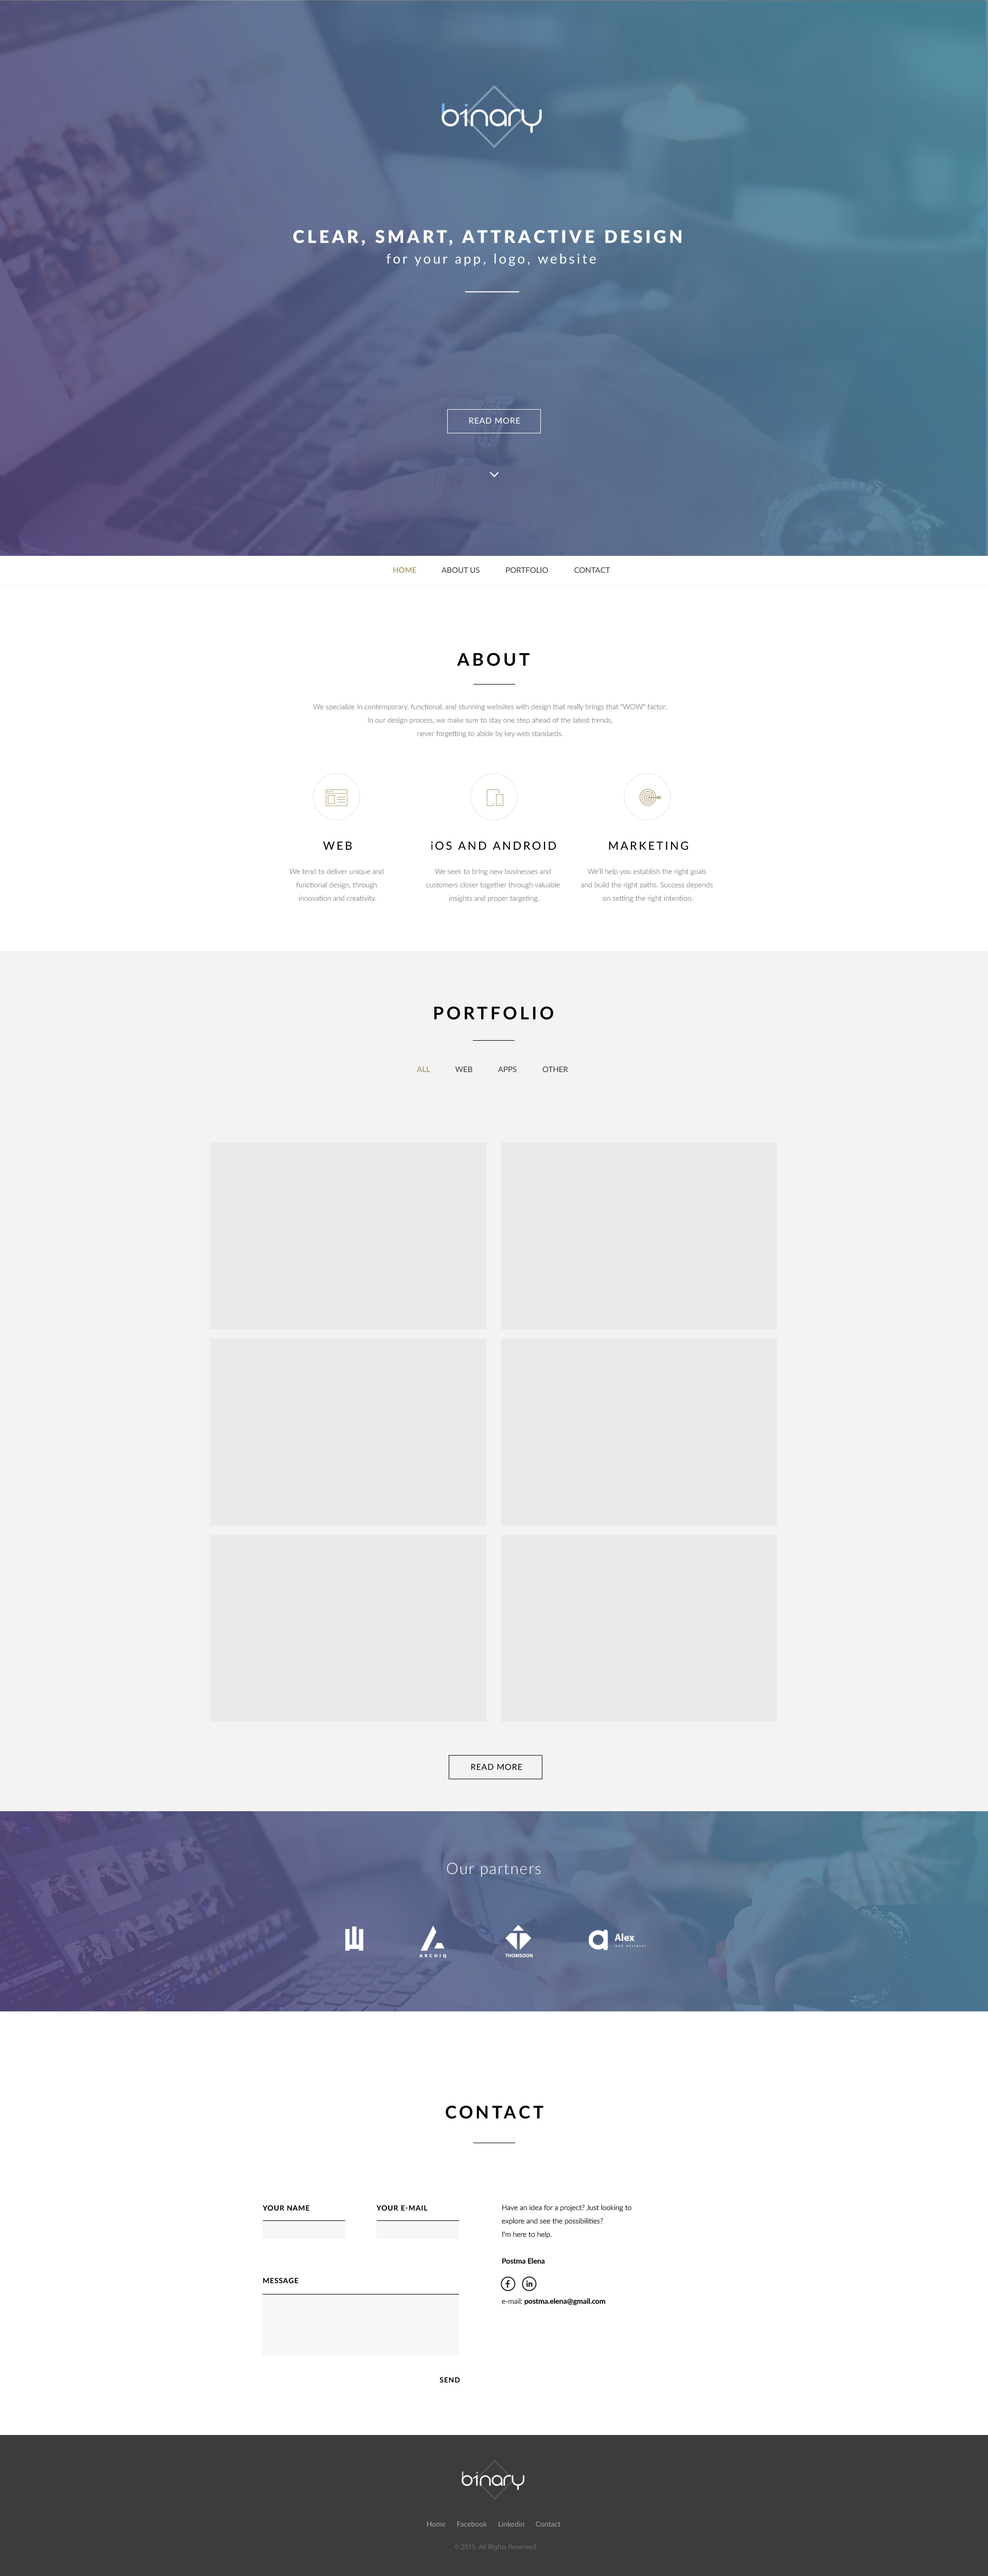
<style>
.page{position:relative;width:988px;height:2576px;background:#ffffff}
.page>*{position:absolute;margin:0}
.t1{font:17.5px/20.6px "Lato-Black";letter-spacing:0.16em;color:#ffffff;text-transform:uppercase}
.t2{font:13.4px/20.6px "Lato-Regular";letter-spacing:0.16em;color:#ffffff}
.t3{font:8.2px "Lato-Regular";letter-spacing:0.06em;color:#ffffff}
.t4{font:7.7px "Lato-Regular";color:#3c3c3c}
.t5{font:7.7px "Lato-Bold";color:#ada074}
.t6{font:17.5px "Lato-Bold";letter-spacing:0.16em;color:#000000;text-transform:uppercase}
.t7{font:7.2px/13.3px "Lato-Light";color:#868585}
.t8{font:11.3px "Lato-Regular";letter-spacing:0.16em;color:#000000}
.t9{font:7.2px/13.4px "Lato-Light";color:#868585}
.t10{font:8.2px "Lato-Regular";letter-spacing:0.06em;color:#000000}
.t11{font:15.6px "Lato-Light";letter-spacing:0.06em;color:#ffffff}
.t12{font:7.2px "Lato-Bold";letter-spacing:0.06em;color:#000000;text-transform:uppercase}
.t13{font:7.2px/13.4px "Lato-Light";color:#000000}
.t14{font:7.2px/13.4px "Lato-Bold";color:#000000}
.t15{font:7.2px "Lato-Regular";color:#a4a4a4}
.t16{font:7.2px "MyriadPro-Regular";color:#6c6c6c}
</style>
<div class="page">
<p class="t1" style="left:293px;top:230px;width:388px;height:36px;text-align:center">Clear, smart, attractive design <br><span class="t2">for your app, logo, website</span></p>
<p class="t3" style="left:469px;top:417px;width:51px;height:7px">READ MORE</p>
<p class="t4" style="left:393px;top:567px;width:217px;height:6px"><span class="t5">HOME    </span>         ABOUT US             PORTFOLIO             CONTACT</p>
<p class="t6" style="left:457px;top:653px;width:73px;height:13px">ABOUT</p>
<p class="t7" style="left:313px;top:704px;width:354px;height:34px;text-align:center">We specialize in contemporary, functional, and stunning websites with design that really brings that "WOW" factor. <br>In our design process, we make sure to stay one step ahead of the latest trends, <br>never forgetting to abide by key web standards.</p>
<p class="t8" style="left:323px;top:842px;width:29px;height:8px">WEB</p>
<p class="t8" style="left:431px;top:842px;width:125px;height:8px">iOS AND ANDROID</p>
<p class="t8" style="left:609px;top:842px;width:79px;height:8px">MARKETING</p>
<p class="t9" style="left:289px;top:868px;width:94px;height:34px;text-align:center">We tend to deliver unique and <br>functional design, through <br>innovation and creativity.</p>
<p class="t9" style="left:426px;top:868px;width:134px;height:34px;text-align:center">We seek to bring new businesses and <br>customers closer together through valuable <br>insights and proper targeting.</p>
<p class="t9" style="left:581px;top:868px;width:132px;height:34px;text-align:center">We’ll help you establish the right goals <br>and build the right paths. Success depends <br>on setting the right intention.</p>
<p class="t6" style="left:434px;top:1006px;width:119px;height:14px">PORTFOLIO</p>
<p class="t4" style="left:417px;top:1066px;width:151px;height:6px"><span class="t5">ALL    </span>         WEB             APPS             OTHER</p>
<p class="t10" style="left:471px;top:1764px;width:51px;height:6px">READ MORE</p>
<p class="t11" style="left:447px;top:1863px;width:94px;height:14px">Our partners</p>
<p class="t6" style="left:446px;top:2106px;width:98px;height:13px">CONTACT</p>
<p class="t12" style="left:262px;top:2205px;width:48px;height:6px">YOUR NAME</p>
<p class="t12" style="left:376px;top:2205px;width:52px;height:6px">YOUR E-MAIL</p>
<p class="t13" style="left:502px;top:2204px;width:130px;height:101px">Have an idea for a project? Just looking to <br>explore and see the possibilities?<br>I'm here to help.<br><span class="t14"><br>Postma Elena<br></span><br><br>e-mail: <span class="t14">postma.elena@gmail.com</span></p>
<p class="t12" style="left:263px;top:2277px;width:36px;height:7px">MESSAGE</p>
<p class="t12" style="left:440px;top:2377px;width:20px;height:5px">SEND</p>
<p class="t15" style="left:427px;top:2521px;width:134px;height:6px">Home      Facebook      Linkedin      Contact</p>
<p class="t16" style="left:454px;top:2544px;width:82px;height:7px">© 2015. All Rights Reserved</p>
</div>
